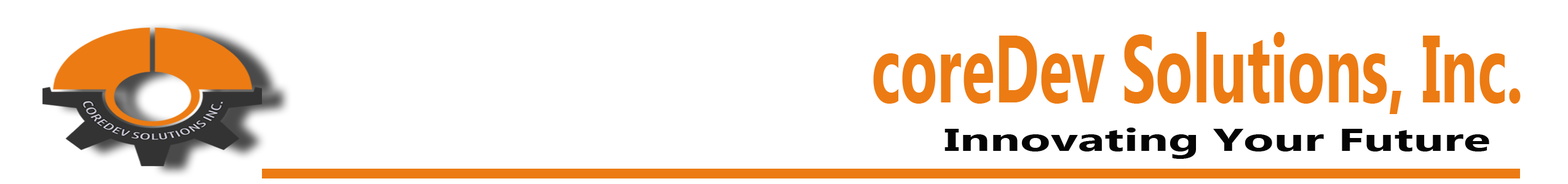
<style>
.page{position:relative;width:1568px;height:184px;background:#ffffff}
.page>*{position:absolute;margin:0}
.t1{font:22.8px "MicrosoftNewTaiLue-Bold";color:#ec7b13;scale:0.64 1}
.t2{font:7.6px "MicrosoftTaiLe-Bold";color:#050505;scale:1.57 1}
</style>
<div class="page">
<p class="t1" style="left:873px;top:32px;width:648px;height:82px">coreDev Solutions, Inc.</p>
<p class="t2" style="left:944px;top:128px;width:545px;height:31px">Innovating Your Future</p>
</div>
